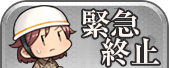
<style>
.page{position:relative;width:169px;height:68px}
.page>*{position:absolute;margin:0}
.t1{font:30px/28px "RyuminPr6N-Bold";color:#fff6f2}
</style>
<div class="page">
<p class="t1" style="left:82px;top:9px;width:78px;height:57px;text-align:center">緊急<br>    終止</p>
</div>
